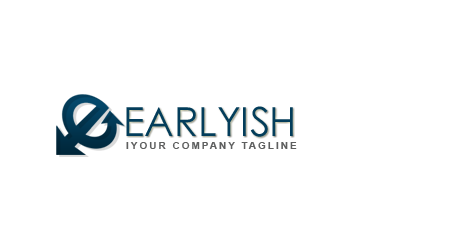
<style>
.page{position:relative;width:450px;height:250px;background:#ffffff}
.page>*{position:absolute;margin:0}
.t1{font:40px "CenturyGothic";color:#033d5b;text-transform:uppercase}
.t2{font:10px "Arial-BoldMT";letter-spacing:0.2em;color:#5e5f5f;text-transform:uppercase}
</style>
<div class="page">
<p class="t1" style="left:126px;top:106px;width:167px;height:31px">earlyish</p>
<p class="t2" style="left:126px;top:142px;width:171px;height:7px">IYour company tagline</p>
</div>
